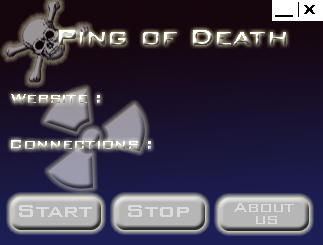
<style>
.page{position:relative;width:323px;height:245px}
.page>*{position:absolute;margin:0}
.t1{font:16px "Arial-BoldMT";color:#000000}
.t2{font:16px "ArialMT";color:#000000}
.t3{font:16px "Arial-Black";color:#000000}
.t4{font:30px "BankGothicBT-Medium"}
.t5{font:18px "BankGothicBT-Medium"}
.t6{font:24px "BankGothicBT-Medium";color:#dcdbdb}
.t7{font:18px/12.1px "BankGothicBT-Medium";color:#dcdbdb}
</style>
<div class="page">
<p class="t1" style="left:275px;top:2px;width:40px;height:15px">__<span class="t2"> | </span><span class="t3">x</span></p>
<p class="t4" style="left:59px;top:30px;width:227px;height:15px">Ping of Death</p>
<p class="t5" style="left:11px;top:94px;width:89px;height:9px">Website :</p>
<p class="t5" style="left:11px;top:140px;width:140px;height:9px">Connections :</p>
<p class="t6" style="left:19px;top:205px;width:73px;height:12px">Start</p>
<p class="t6" style="left:128px;top:205px;width:61px;height:12px">Stop</p>
<p class="t7" style="left:234px;top:203px;width:60px;height:21px">About<br>   us</p>
</div>
